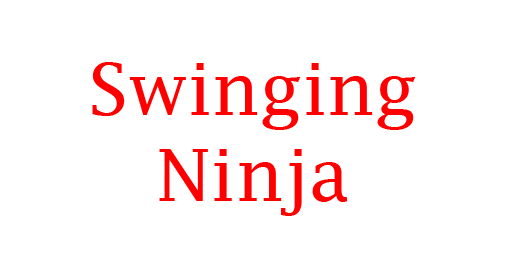
<style>
.page{position:relative;width:512px;height:256px;background:#ffffff}
.page>*{position:absolute;margin:0}
.t1{font:72px "LucidaFax";color:#ff0000}
</style>
<div class="page">
<p class="t1" style="left:92px;top:62px;width:324px;height:154px;text-align:center">Swinging<br>Ninja</p>
</div>
